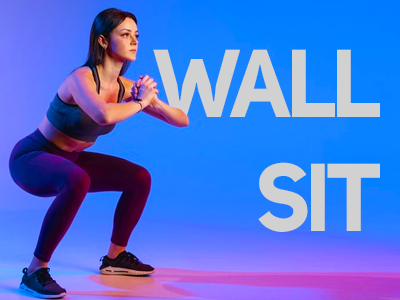
<style>
.page{position:relative;width:400px;height:300px}
.page>*{position:absolute;margin:0}
.t1{font:94.9px "UniSansBold";letter-spacing:-0.05em;color:#d1d1d1}
</style>
<div class="page">
<p class="t1" style="left:153px;top:49px;width:227px;height:183px;text-align:right">WALL<br>SIT</p>
</div>
